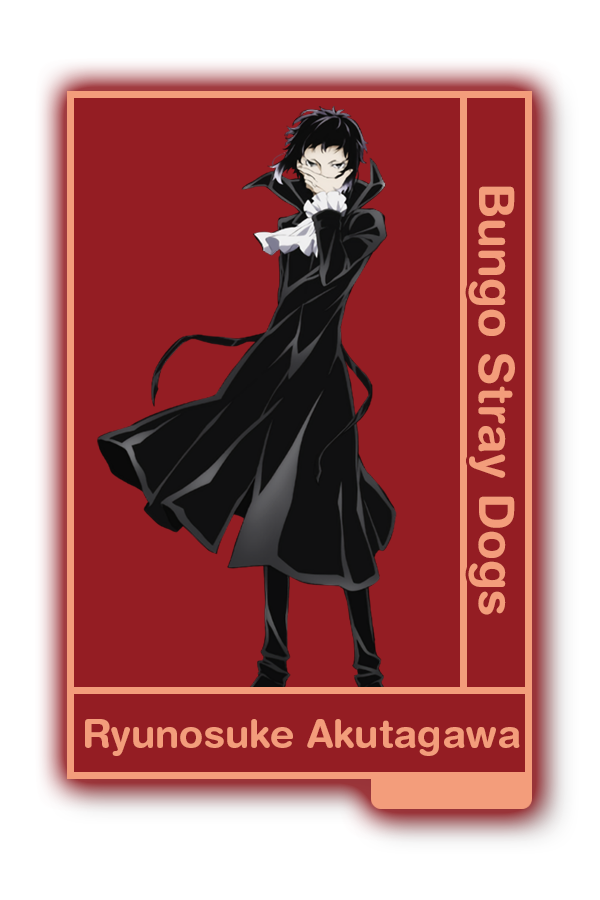
<style>
.page{position:relative;width:600px;height:900px;background:#941d23}
.page>*{position:absolute;margin:0}
.t1{font:48.8px "HelveticaRounded-Bold";color:#f39d7b}
.t2{font:39.6px "HelveticaRounded-Bold";color:#f39d7b}
</style>
<div class="page">
<p class="t1" style="left:468px;top:186px;width:47px;height:429px;rotate:90deg">Bungo Stray Dogs</p>
<p class="t2" style="left:85px;top:719px;width:435px;height:37px">Ryunosuke Akutagawa</p>
</div>
